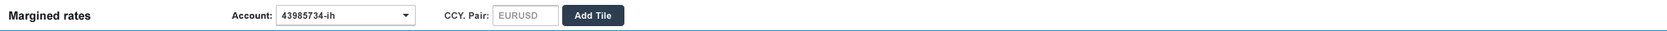
<style>
.page{position:relative;width:1667px;height:31px;background:#ffffff}
.page>*{position:absolute;margin:0}
.t1{font:9px "Arial-BoldMT";letter-spacing:0.025em;color:#333333}
.t2{font:9px "Arial-BoldMT";letter-spacing:0.025em;color:#959496}
.t3{font:9px "Arial-BoldMT";letter-spacing:0.025em;color:#ffffff}
</style>
<div class="page">
<p class="t1" style="left:232px;top:12px;width:40px;height:7px">Account:</p>
<p class="t1" style="left:281px;top:12px;width:54px;height:7px">43985734-ih</p>
<p class="t1" style="left:444px;top:12px;width:44px;height:7px">CCY. Pair:</p>
<p class="t2" style="left:499px;top:12px;width:39px;height:7px">EURUSD</p>
<p class="t3" style="left:574px;top:12px;width:37px;height:7px">Add Tile</p>
</div>
